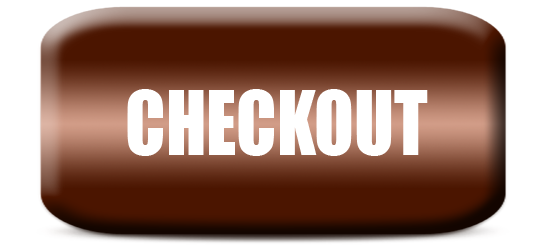
<style>
.page{position:relative;width:550px;height:252px;background:#ffffff}
.page>*{position:absolute;margin:0}
.t1{font:81.7px "Impact";color:#ffffff;scale:0.89 1}
</style>
<div class="page">
<p class="t1" style="left:127px;top:89px;width:301px;height:67px">CHECKOUT</p>
</div>
